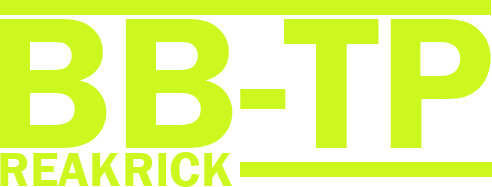
<style>
.page{position:relative;width:492px;height:187px;background:#ccf71f}
.page>*{position:absolute;margin:0}
.t1{font:193px "FranklinGothic-Demi";color:#ccf71f}
.t2{font:50px "FranklinGothic-Demi";color:#ccf71f}
</style>
<div class="page">
<p class="t1" style="left:0px;top:19px;width:491px;height:129px">BB-TP</p>
<p class="t2" style="left:0px;top:153px;width:120px;height:33px">REAK</p>
<p class="t2" style="left:125px;top:152px;width:107px;height:35px">RICK</p>
</div>
